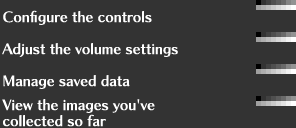
<style>
.page{position:relative;width:296px;height:128px;background:#333333}
.page>*{position:absolute;margin:0}
.t1{font:14px/16px "ChiaroStd-B";color:#ffffff}
</style>
<div class="page">
<p class="t1" style="left:2px;top:10px;width:176px;height:117px">Configure the controls<br><br>Adjust the volume settings<br><br>Manage saved data<br> <br>View the images you've<br>collected so far</p>
</div>
